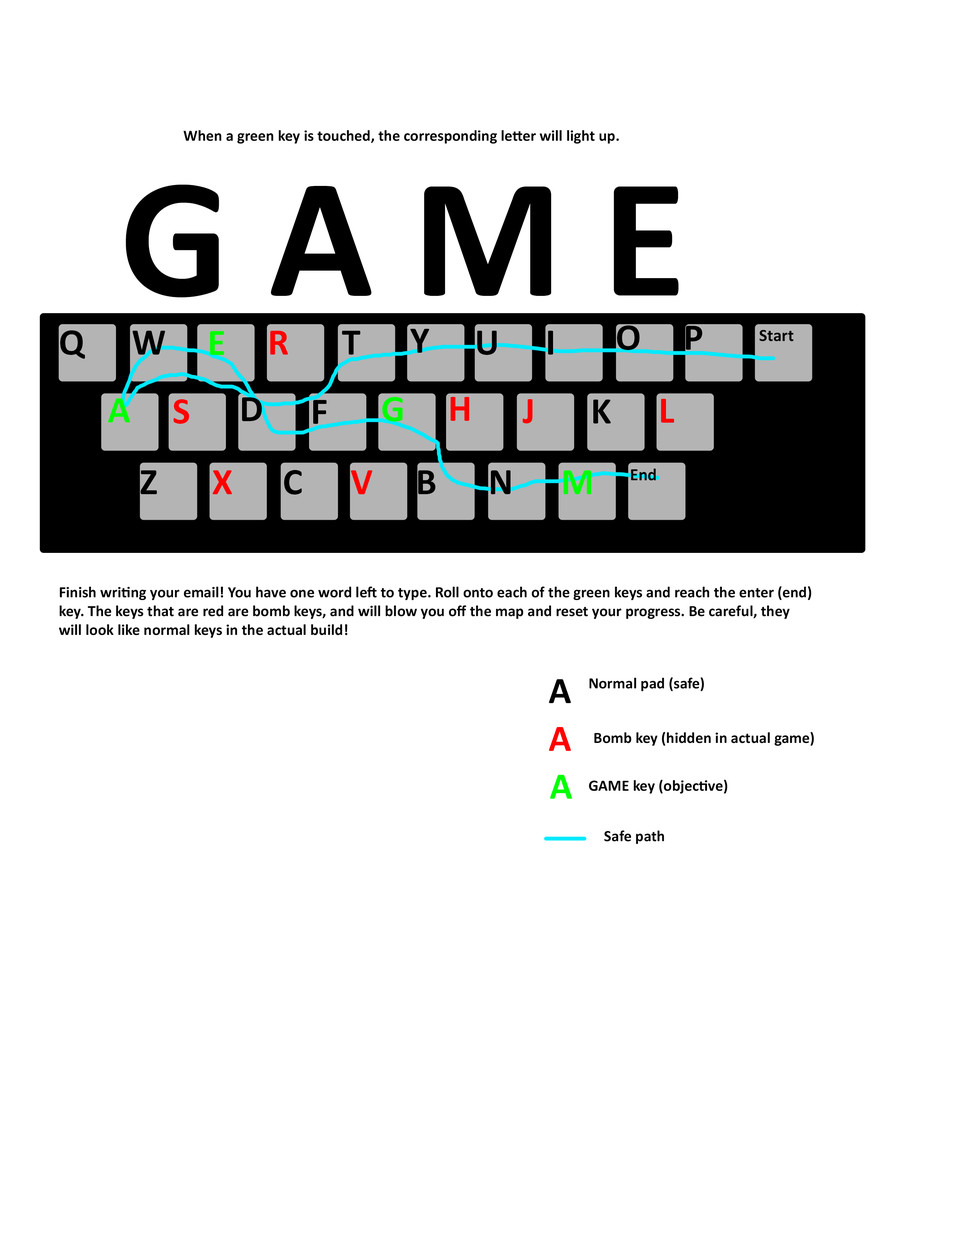
<style>
.page{position:relative;width:960px;height:1242px;background:#ffffff}
.page>*{position:absolute;margin:0}
.t1{font:15.7px "Calibri-Bold";color:#000000}
.t2{font:172.5px "Calibri-Bold";color:#000000}
.t3{font:37.6px "Calibri-Bold";color:#000000}
.t4{font:17.3px "Calibri-Bold";color:#000000}
.t5{font:37.6px "Calibri-Bold";color:#00ff00}
.t6{font:37.6px "Calibri-Bold";color:#ff0000}
</style>
<div class="page">
<p class="t1" style="left:183px;top:130px;width:436px;height:14px">When a green key is touched, the corresponding letter will light up.</p>
<p class="t2" style="left:126px;top:184px;width:553px;height:113px">G A M E</p>
<p class="t3" style="left:410px;top:329px;width:19px;height:24px">Y</p>
<p class="t3" style="left:617px;top:325px;width:23px;height:25px">O</p>
<p class="t3" style="left:686px;top:326px;width:16px;height:24px">P</p>
<p class="t4" style="left:759px;top:330px;width:35px;height:11px">Start</p>
<p class="t3" style="left:60px;top:330px;width:25px;height:29px">Q</p>
<p class="t3" style="left:133px;top:331px;width:32px;height:24px">W</p>
<p class="t5" style="left:210px;top:331px;width:14px;height:24px">E</p>
<p class="t6" style="left:270px;top:331px;width:18px;height:24px">R</p>
<p class="t3" style="left:342px;top:331px;width:18px;height:24px">T</p>
<p class="t3" style="left:477px;top:331px;width:20px;height:24px">U</p>
<p class="t3" style="left:548px;top:331px;width:5px;height:24px">I</p>
<p class="t5" style="left:108px;top:398px;width:22px;height:25px">A</p>
<p class="t6" style="left:174px;top:399px;width:15px;height:25px">S</p>
<p class="t3" style="left:242px;top:397px;width:20px;height:24px">D</p>
<p class="t3" style="left:313px;top:400px;width:14px;height:24px">F</p>
<p class="t5" style="left:382px;top:397px;width:21px;height:25px">G</p>
<p class="t6" style="left:451px;top:397px;width:18px;height:24px">H</p>
<p class="t6" style="left:522px;top:399px;width:11px;height:24px">J</p>
<p class="t3" style="left:593px;top:399px;width:18px;height:25px">K</p>
<p class="t6" style="left:661px;top:399px;width:13px;height:24px">L</p>
<p class="t3" style="left:140px;top:470px;width:17px;height:24px">Z</p>
<p class="t6" style="left:212px;top:470px;width:20px;height:25px">X</p>
<p class="t3" style="left:284px;top:470px;width:18px;height:25px">C</p>
<p class="t6" style="left:351px;top:470px;width:21px;height:25px">V</p>
<p class="t3" style="left:418px;top:470px;width:18px;height:24px">B</p>
<p class="t3" style="left:491px;top:470px;width:19px;height:25px">N</p>
<p class="t5" style="left:564px;top:470px;width:27px;height:25px">M</p>
<p class="t4" style="left:631px;top:469px;width:25px;height:12px">End</p>
<p class="t1" style="left:59px;top:586px;width:752px;height:52px">Finish writing your email! You have one word left to type. Roll onto each of the green keys and reach the enter (end) key. The keys that are red are bomb keys, and will blow you off the map and reset your progress. Be careful, they will look like normal keys in the actual build!</p>
<p class="t1" style="left:589px;top:678px;width:115px;height:14px">Normal pad (safe)</p>
<p class="t3" style="left:549px;top:679px;width:22px;height:25px">A</p>
<p class="t6" style="left:549px;top:727px;width:22px;height:24px">A</p>
<p class="t1" style="left:594px;top:732px;width:220px;height:14px">Bomb key (hidden in actual game)</p>
<p class="t5" style="left:550px;top:775px;width:22px;height:24px">A</p>
<p class="t1" style="left:589px;top:780px;width:138px;height:14px">GAME key (objective)</p>
<p class="t1" style="left:604px;top:830px;width:60px;height:14px">Safe path</p>
</div>
